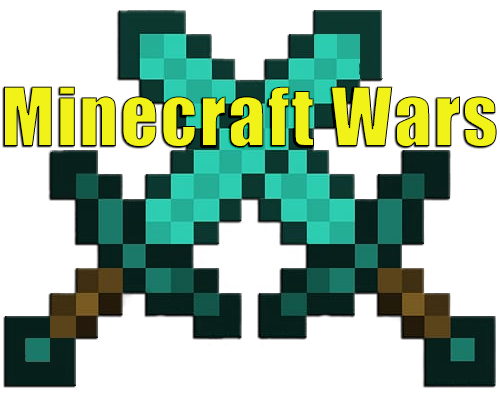
<style>
.page{position:relative;width:500px;height:400px;background:#ffffff}
.page>*{position:absolute;margin:0}
.t1{font:75px "Impact";letter-spacing:0.025em;color:#f0f218}
</style>
<div class="page">
<p class="t1" style="left:4px;top:86px;width:493px;height:61px">Minecraft Wars</p>
</div>
